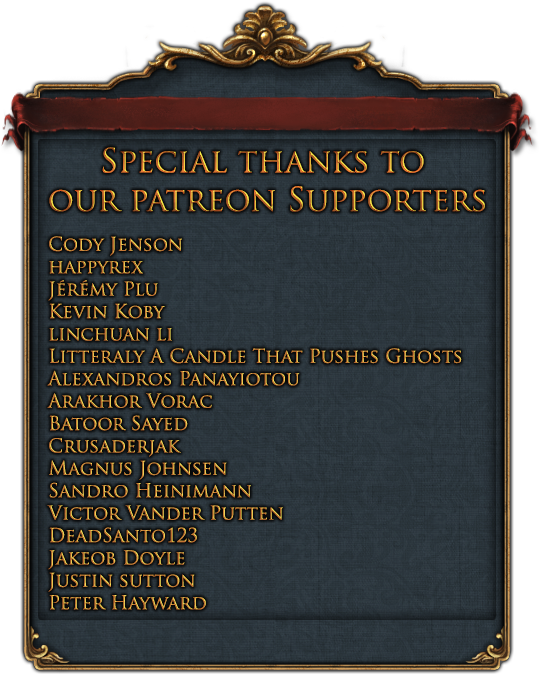
<style>
.page{position:relative;width:539px;height:674px}
.page>*{position:absolute;margin:0}
.t1{font:32.3px "TrajanPro-Regular"}
.t2{font:18.7px "TrajanPro-Regular"}
</style>
<div class="page">
<p class="t1" style="left:49px;top:147px;width:436px;height:65px;text-align:center">Special thanks to <br>our patreon Supporters</p>
<p class="t2" style="left:47px;top:236px;width:415px;height:374px">Cody Jenson<br>happyrex<br>Jérémy Plu<br>Kevin Koby<br>linchuan li<br>Litteraly A Candle That Pushes Ghosts<br>Alexandros Panayiotou<br>Arakhor Vorac<br>Batoor Sayed<br>Crusaderjak<br>Magnus Johnsen<br>Sandro Heinimann<br>Victor Vander Putten<br>DeadSanto123<br>Jakeob Doyle<br>Justin sutton<br>Peter Hayward</p>
</div>
